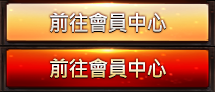
<style>
.page{position:relative;width:215px;height:92px}
.page>*{position:absolute;margin:0}
.t1{font:21.4px "MicrosoftJhengHeiBold";letter-spacing:-0.05em;color:#ffffff;scale:0.96 1}
.t2{font:21.4px "MicrosoftJhengHeiBold";letter-spacing:-0.05em;scale:0.96 1}
</style>
<div class="page">
<p class="t1" style="left:50px;top:12px;width:116px;height:20px">前往會員中心</p>
<p class="t2" style="left:50px;top:58px;width:116px;height:20px">前往會員中心</p>
</div>
